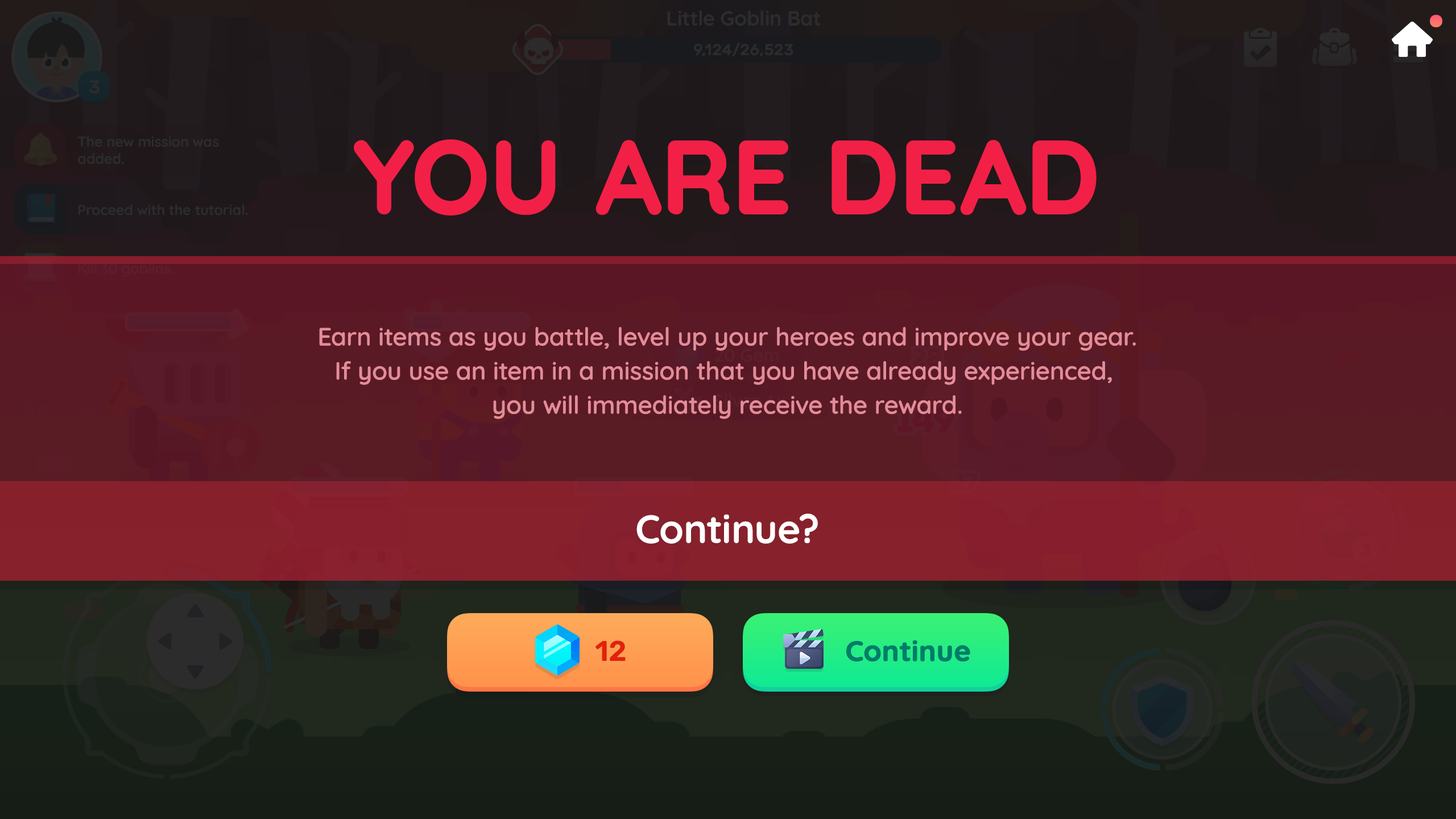
<style>
.page{position:relative;width:1456px;height:819px}
.page>*{position:absolute;margin:0}
.t1{font:102.4px "Quicksand-Bold";color:#f22046;text-transform:uppercase;font-weight:bold}
.t2{font:25px/34.1px "Quicksand-SemiBold";color:#e48c99}
.t3{font:39.8px "Quicksand-Bold";color:#ffffff}
.t4{font:28.4px "Rubik-SemiBold";letter-spacing:-0.01em;color:#e1220c}
.t5{font:28.4px "Quicksand-Bold";color:#007c69;font-weight:bold}
</style>
<div class="page">
<p class="t1" style="left:354px;top:139px;width:743px;height:77px">YOU ARE DEAD</p>
<p class="t2" style="left:319px;top:326px;width:817px;height:93px;text-align:center">Earn items as you battle, level up your heroes and improve your gear.<br>If you use an item in a mission that you have already experienced, <br>you will immediately receive the reward.</p>
<p class="t3" style="left:636px;top:514px;width:182px;height:30px">Continue?</p>
<p class="t4" style="left:595px;top:640px;width:31px;height:21px">12</p>
<p class="t5" style="left:846px;top:640px;width:124px;height:21px">Continue</p>
</div>
